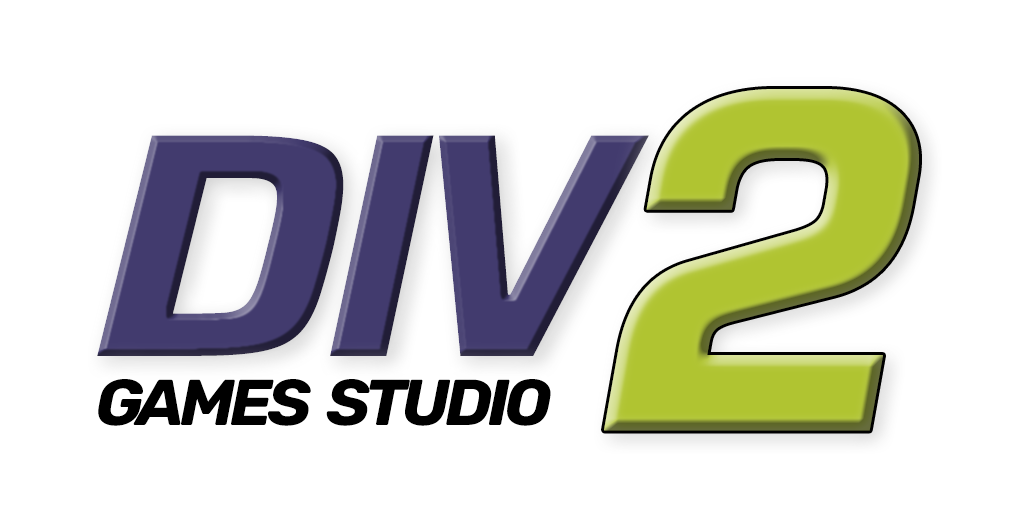
<style>
.page{position:relative;width:1024px;height:512px;background:#ffffff}
.page>*{position:absolute;margin:0}
.t1{font:462.8px "Square721BT-Bold";letter-spacing:-0.06em;color:#b0c431;font-weight:bold;font-style:italic}
.t2{font:320px "SairaItalic-BoldItalic";letter-spacing:-0.06em;color:#423b6e;scale:1.16 1}
.t3{font:320px "SairaItalic-BoldItalic";letter-spacing:-0.06em;color:#423b6e}
.t4{font:320px "SairaItalic-BoldItalic";letter-spacing:-0.1em;color:#423b6e}
.t5{font:64.8px "RubikItalic-BoldItalic";letter-spacing:-0.07em;color:#000000}
</style>
<div class="page">
<p class="t1" style="left:604px;top:89px;width:315px;height:342px">2</p>
<p class="t2" style="left:97px;top:135px;width:552px;height:221px">D<span class="t3">I</span><span class="t4">V</span></p>
<p class="t5" style="left:98px;top:379px;width:453px;height:47px">GAMES  STUDIO</p>
</div>
